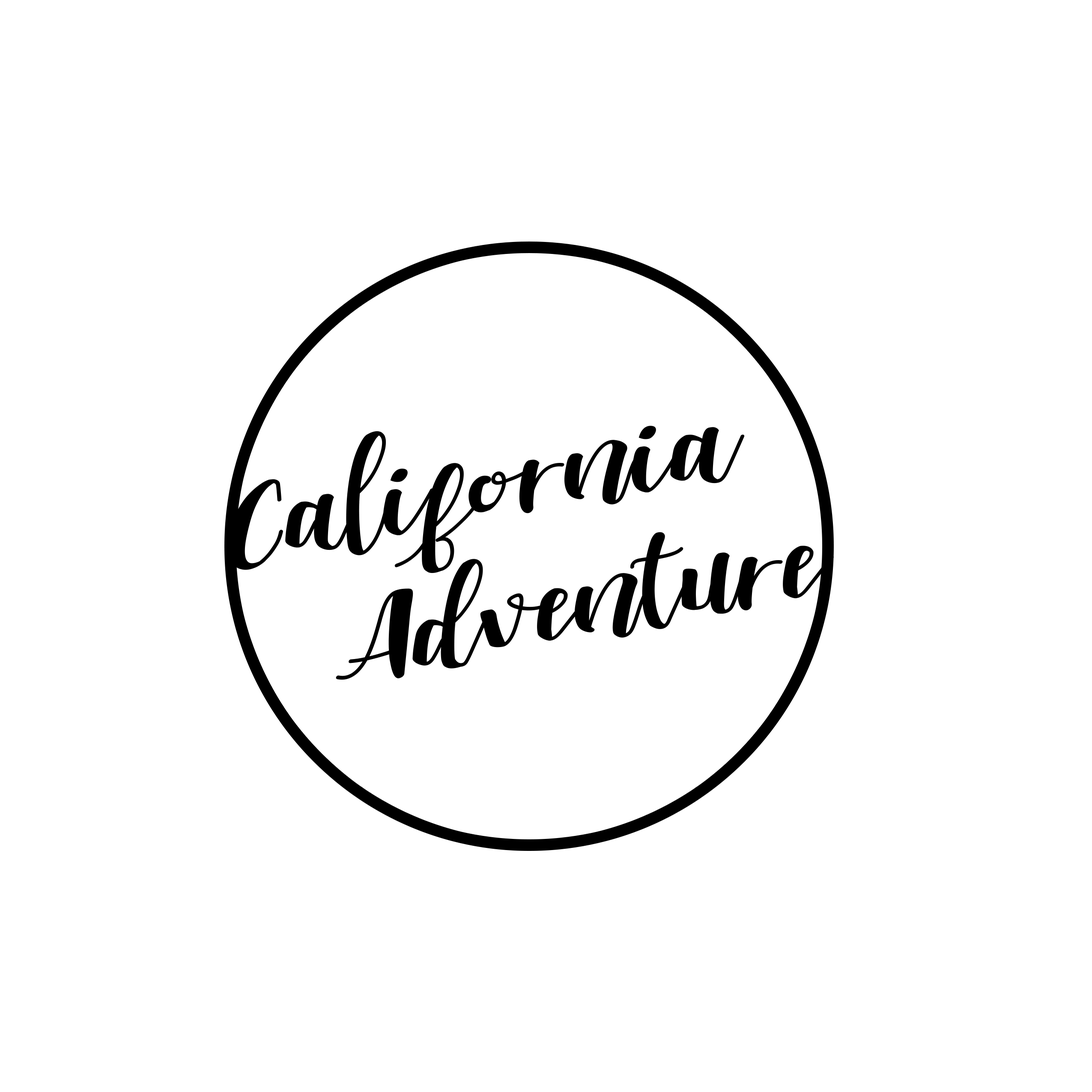
<style>
.page{position:relative;width:1092px;height:1092px;background:#ffffff}
.page>*{position:absolute;margin:0}
.t1{font:112.4px "ShellaClean";color:#000000;scale:1.12 1}
</style>
<div class="page">
<p class="t1" style="left:229px;top:426px;width:605px;height:254px;rotate:-10deg">California<br>  Adventure</p>
</div>
